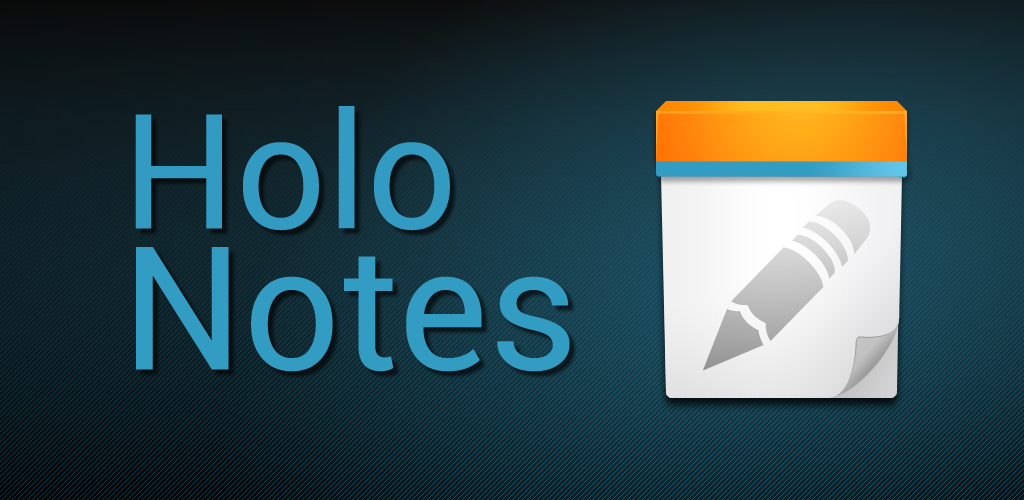
<style>
.page{position:relative;width:1024px;height:500px}
.page>*{position:absolute;margin:0}
.t1{font:160px "Roboto-Regular";color:#339bc1}
.t2{font:172px "Roboto-Regular";color:#339cc2}
</style>
<div class="page">
<p class="t1" style="left:135px;top:106px;width:315px;height:125px">Holo</p>
<p class="t2" style="left:136px;top:247px;width:434px;height:125px">Notes</p>
</div>
